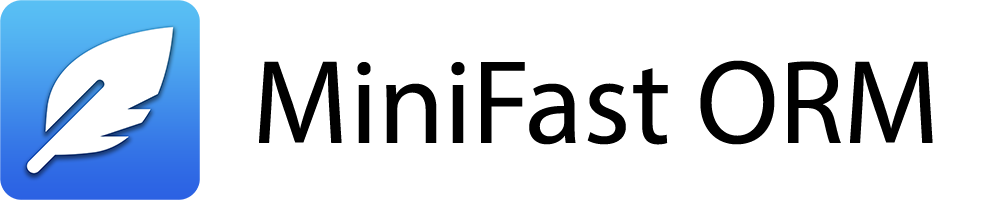
<style>
.page{position:relative;width:1000px;height:200px;background:#ffffff}
.page>*{position:absolute;margin:0}
.t1{font:120px "MyriadPro-Regular";color:#000000}
</style>
<div class="page">
<p class="t1" style="left:259px;top:60px;width:674px;height:85px">MiniFast ORM</p>
</div>
